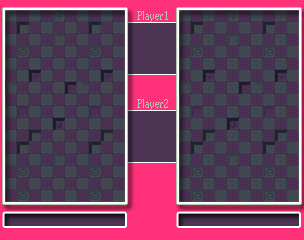
<style>
.page{position:relative;width:304px;height:240px}
.page>*{position:absolute;margin:0}
.t1{font:12px "MS Serif";color:#b1c3ab}
</style>
<div class="page">
<p class="t1" style="left:137px;top:11px;width:31px;height:11px">Player1</p>
<p class="t1" style="left:137px;top:99px;width:31px;height:11px">Player2</p>
</div>
